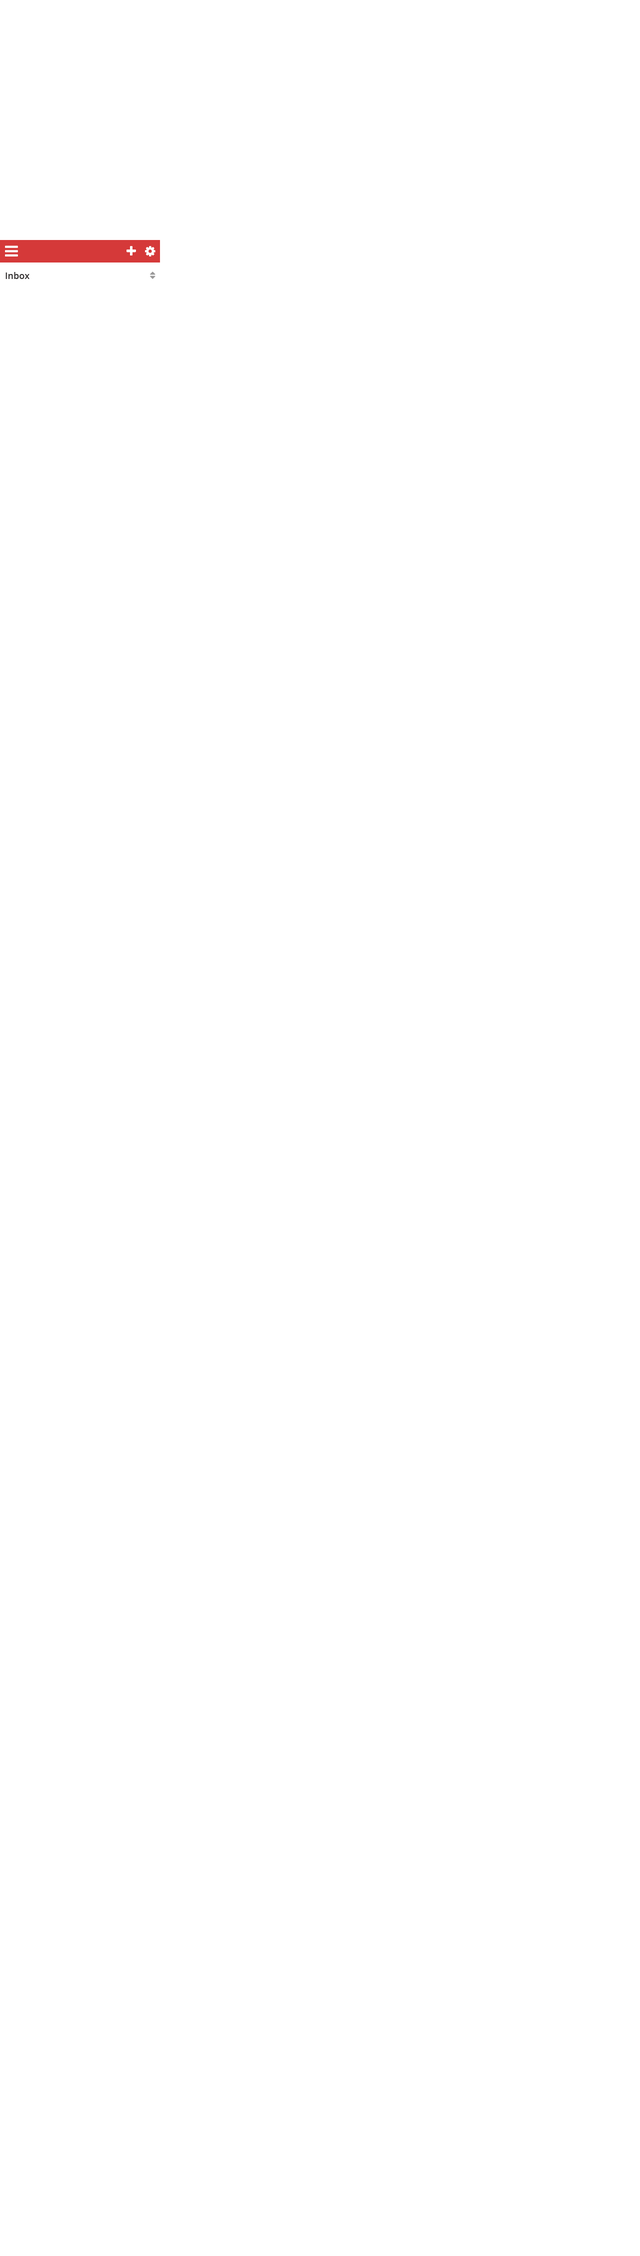
<style>
.page{position:relative;width:640px;height:2256px;background:#ffffff}
.page>*{position:absolute;margin:0}
.t1{font:9px "OpenSans-Semibold";color:#343131}
</style>
<div class="page">
<p class="t1" style="left:6px;top:272px;width:24px;height:7px">Inbox</p>
</div>
